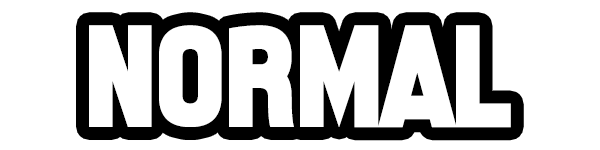
<style>
.page{position:relative;width:600px;height:150px;background:#ffffff}
.page>*{position:absolute;margin:0}
.t1{font:160px "SheSmiles";color:#ffffff}
</style>
<div class="page">
<p class="t1" style="left:89px;top:25px;width:422px;height:103px">NORMAL</p>
</div>
